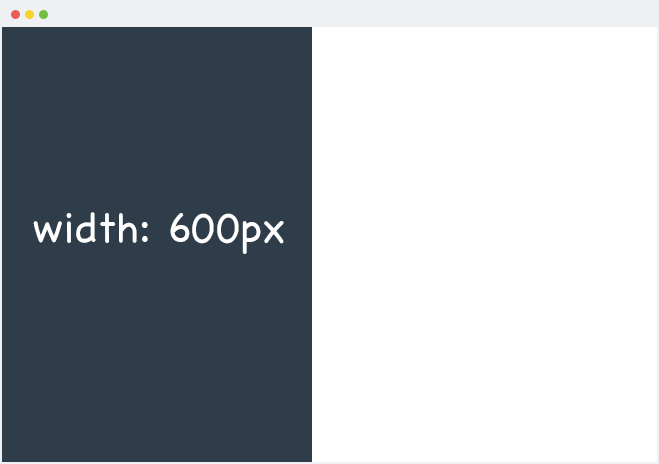
<style>
.page{position:relative;width:659px;height:464px;background:#ffffff}
.page>*{position:absolute;margin:0}
.t1{font:42px "Chalkboard";color:#ffffff}
</style>
<div class="page">
<p class="t1" style="left:33px;top:212px;width:251px;height:42px">width: 600px</p>
</div>
